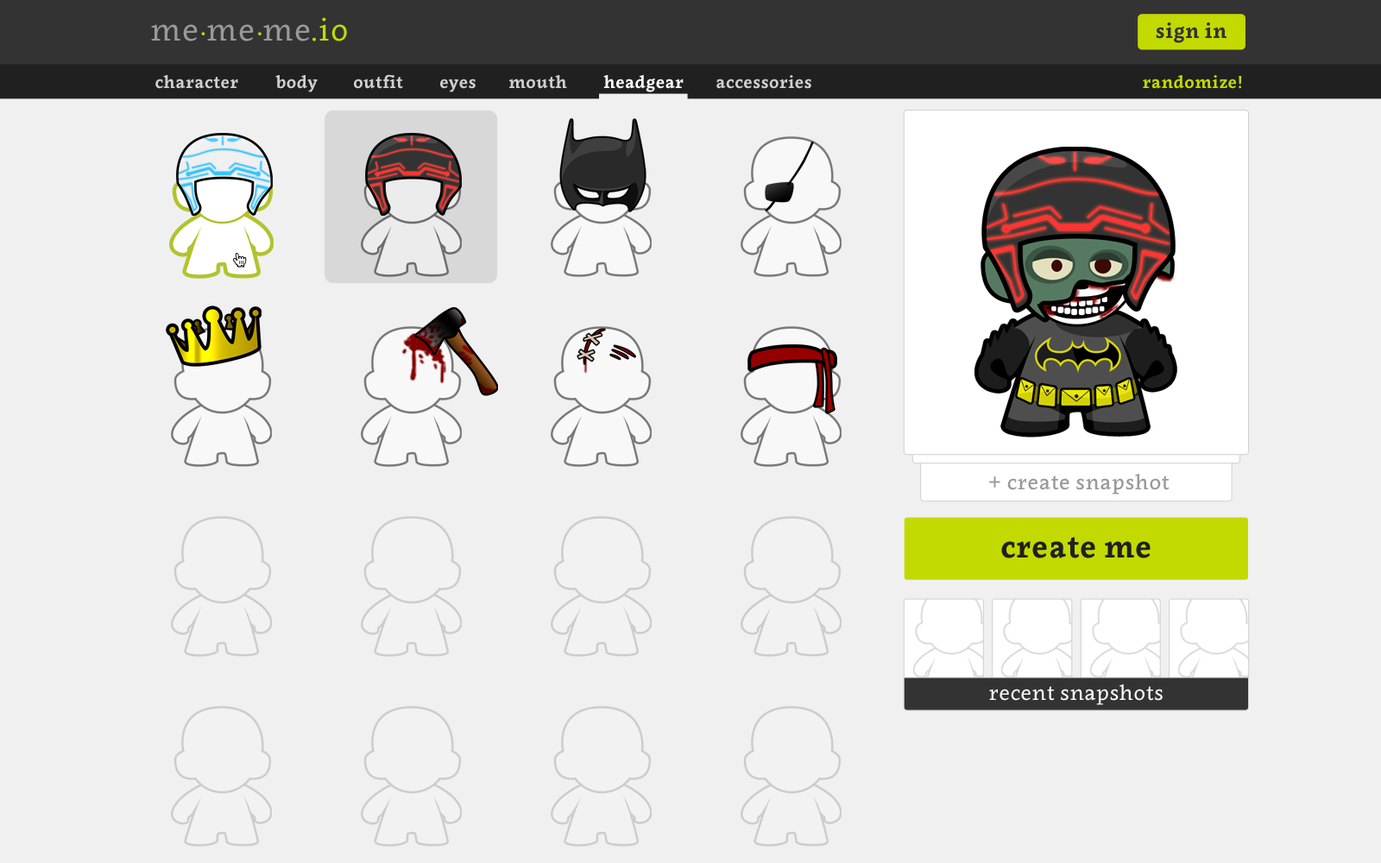
<style>
.page{position:relative;width:1381px;height:863px;background:#f0f0f0}
.page>*{position:absolute;margin:0}
.t1{font:31.1px "Clavo-Regular";letter-spacing:0.02em;color:#999999}
.t2{font:31.1px "Clavo-Regular";letter-spacing:0.02em;color:#c2da00}
.t3{font:20.7px "Clavo-Bold";letter-spacing:0.02em;color:#333333}
.t4{font:17.3px "Clavo-Bold";letter-spacing:0.02em;color:#cfcfcf}
.t5{font:17.3px "Clavo-Bold";letter-spacing:0.02em;color:#ffffff}
.t6{font:17.3px "Clavo-Bold";letter-spacing:0.02em;color:#c2da00}
.t7{font:20.7px "Clavo-Medium";letter-spacing:0.02em;color:#999999}
.t8{font:31.1px "Clavo-Bold";letter-spacing:0.02em;color:#202020}
.t9{font:20.7px "Clavo-Regular";letter-spacing:0.02em;color:#ffffff}
</style>
<div class="page">
<p class="t1" style="left:151px;top:17px;width:196px;height:24px">me me me<span class="t2">.io</span></p>
<p class="t3" style="left:1156px;top:22px;width:71px;height:21px">sign in</p>
<p class="t4" style="left:155px;top:75px;width:83px;height:14px">character</p>
<p class="t4" style="left:275px;top:75px;width:43px;height:17px">body</p>
<p class="t4" style="left:354px;top:74px;width:49px;height:15px">outfit</p>
<p class="t4" style="left:509px;top:75px;width:58px;height:14px">mouth</p>
<p class="t5" style="left:603px;top:75px;width:81px;height:17px">headgear</p>
<p class="t4" style="left:717px;top:75px;width:94px;height:14px">accessories</p>
<p class="t6" style="left:1143px;top:75px;width:99px;height:14px">randomize!</p>
<p class="t4" style="left:440px;top:79px;width:36px;height:13px">eyes</p>
<p class="t7" style="left:989px;top:474px;width:181px;height:21px">+ create snapshot</p>
<p class="t8" style="left:1001px;top:537px;width:150px;height:22px">create me</p>
<p class="t9" style="left:989px;top:685px;width:174px;height:20px">recent snapshots</p>
</div>
